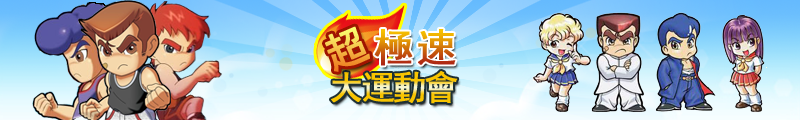
<style>
.page{position:relative;width:800px;height:120px}
.page>*{position:absolute;margin:0}
.t1{font:42px "SimHei";letter-spacing:-0.1em;font-weight:bold}
.t2{font:40px "SimHei";letter-spacing:0.05em;font-weight:bold}
.t3{font:34px "SimHei";letter-spacing:-0.1em;font-weight:bold}
</style>
<div class="page">
<p class="t1" style="left:325px;top:26px;width:45px;height:46px;rotate:-23deg">超</p>
<p class="t2" style="left:374px;top:29px;width:82px;height:37px">極速</p>
<p class="t3" style="left:331px;top:71px;width:127px;height:33px">大運動會</p>
</div>
